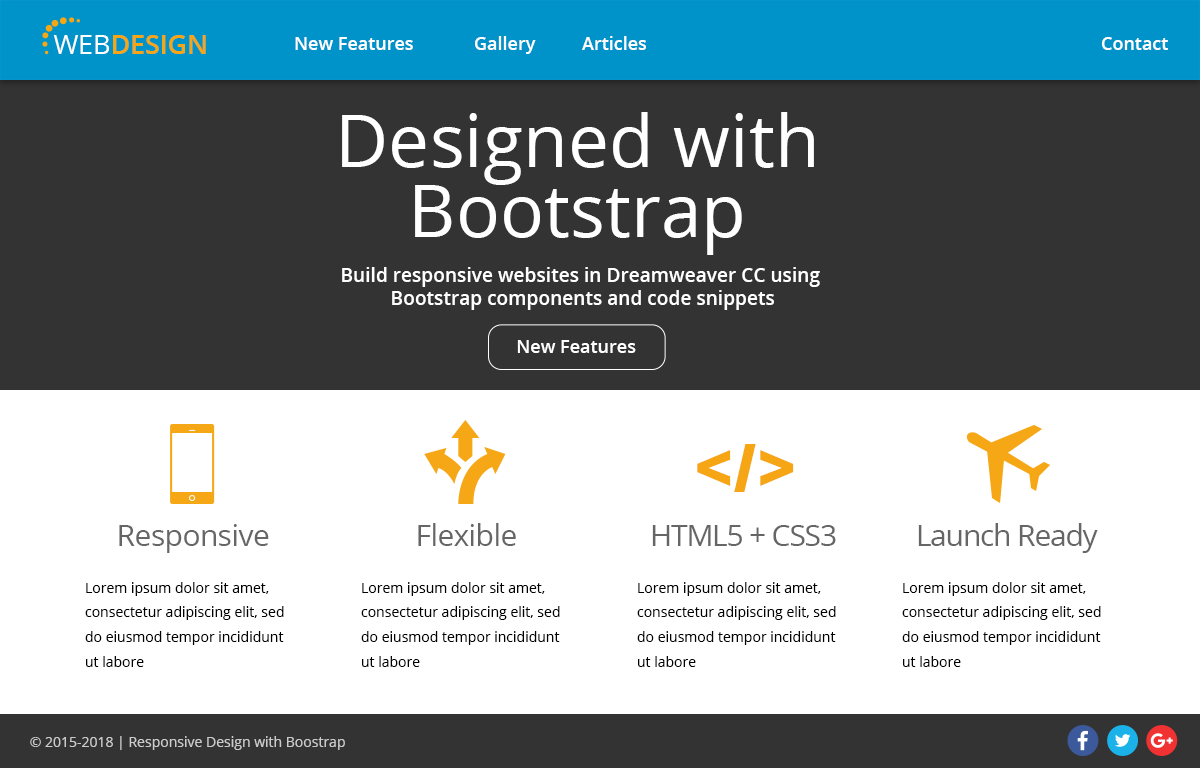
<style>
.page{position:relative;width:1200px;height:768px;background:#333333}
.page>*{position:absolute;margin:0}
.t1{font:26.7px "OpenSans-Semibold";color:#f6a716}
.t2{font:26.7px "OpenSans";color:#ffffff}
.t3{font:18px "OpenSans-Semibold";color:#ffffff}
.t4{font:73.3px/69.7px "OpenSans";color:#ffffff}
.t5{font:19.1px "OpenSans-Semibold";color:#ffffff}
.t6{font:63.3px "Braggadocio";color:#f6a716}
.t7{font:30px "OpenSans";letter-spacing:-0.02em;color:#666666}
.t8{font:30px "OpenSans";letter-spacing:-0.04em;color:#666666}
.t9{font:14px/24.8px "OpenSans";color:#000000}
.t10{font:14px "OpenSans";color:#cccccc}
</style>
<div class="page">
<p class="t1" style="left:53px;top:35px;width:153px;height:19px"><span class="t2">WEB</span>DESIGN</p>
<p class="t3" style="left:295px;top:36px;width:351px;height:18px">New Features  Gallery  Articles</p>
<p class="t3" style="left:1101px;top:37px;width:67px;height:13px">Contact</p>
<p class="t4" style="left:342px;top:112px;width:472px;height:143px;text-align:center">Designed with<br>Bootstrap</p>
<p class="t5" style="left:342px;top:267px;width:478px;height:43px;text-align:center">Build responsive websites in Dreamweaver CC using <br>Bootstrap components and code snippets</p>
<p class="t3" style="left:517px;top:340px;width:119px;height:13px">New Features</p>
<p class="t6" style="left:697px;top:444px;width:97px;height:48px">&lt;/&gt;</p>
<p class="t7" style="left:119px;top:524px;width:150px;height:29px">Responsive</p>
<p class="t7" style="left:418px;top:523px;width:98px;height:23px">Flexible</p>
<p class="t8" style="left:652px;top:525px;width:184px;height:21px">HTML5 + CSS3</p>
<p class="t8" style="left:918px;top:523px;width:180px;height:30px">Launch Ready</p>
<p class="t9" style="left:85px;top:582px;width:199px;height:85px">Lorem ipsum dolor sit amet, consectetur adipiscing elit, sed do eiusmod tempor incididunt ut labore</p>
<p class="t9" style="left:361px;top:582px;width:199px;height:85px">Lorem ipsum dolor sit amet, consectetur adipiscing elit, sed do eiusmod tempor incididunt ut labore</p>
<p class="t9" style="left:637px;top:582px;width:199px;height:85px">Lorem ipsum dolor sit amet, consectetur adipiscing elit, sed do eiusmod tempor incididunt ut labore</p>
<p class="t9" style="left:902px;top:582px;width:199px;height:85px">Lorem ipsum dolor sit amet, consectetur adipiscing elit, sed do eiusmod tempor incididunt ut labore</p>
<p class="t10" style="left:30px;top:736px;width:315px;height:14px">© 2015-2018 | Responsive Design with Boostrap</p>
</div>
